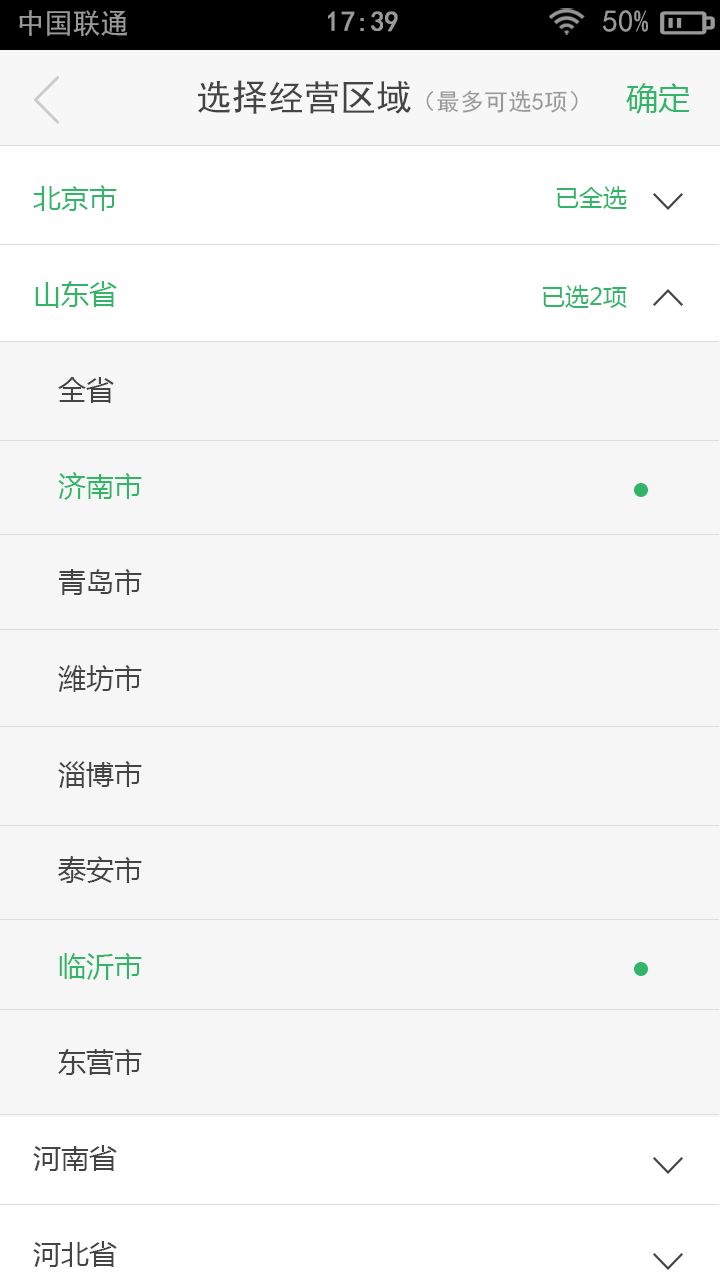
<style>
.page{position:relative;width:720px;height:1280px;background:#f6f6f6}
.page>*{position:absolute;margin:0}
.t1{font:28px "SimHei";color:#999999}
.t2{font:28px "SimHei";color:#999999;font-weight:bold}
.t3{font:31px "SimHei";color:#999999}
.t4{font:24px "SimHei";color:#999999}
.t5{font:36px "SimHei";color:#999999}
.t6{font:36px "SimHei";color:#444444}
.t7{font:32px "MicrosoftYaHei";color:#32b569}
.t8{font:28px/96px "MicrosoftYaHei";color:#444444}
.t9{font:28px/96px "MicrosoftYaHei";color:#32b569}
.t10{font:24px "MicrosoftYaHei";color:#32b569}
</style>
<div class="page">
<p class="t1" style="left:19px;top:10px;width:109px;height:26px">中国联通</p>
<p class="t2" style="left:328px;top:11px;width:70px;height:21px">17:39</p>
<p class="t3" style="left:603px;top:10px;width:45px;height:22px">50%</p>
<p class="t4" style="left:198px;top:80px;width:380px;height:34px"><span class="t5">    </span><span class="t6">选择经营区域</span>（最多可选5项）</p>
<p class="t7" style="left:626px;top:83px;width:64px;height:31px">确定</p>
<p class="t8" style="left:33px;top:185px;width:109px;height:1082px"><span class="t9">北京市<br>山东省<br></span>   全省<br>   <span class="t9">济南市<br></span>   青岛市<br>   潍坊市<br>   淄博市<br>   泰安市<br>   <span class="t9">临沂市<br></span>   东营市<br>河南省<br>河北省</p>
<p class="t10" style="left:556px;top:186px;width:71px;height:23px">已全选</p>
<p class="t10" style="left:542px;top:285px;width:85px;height:23px">已选2项</p>
</div>
